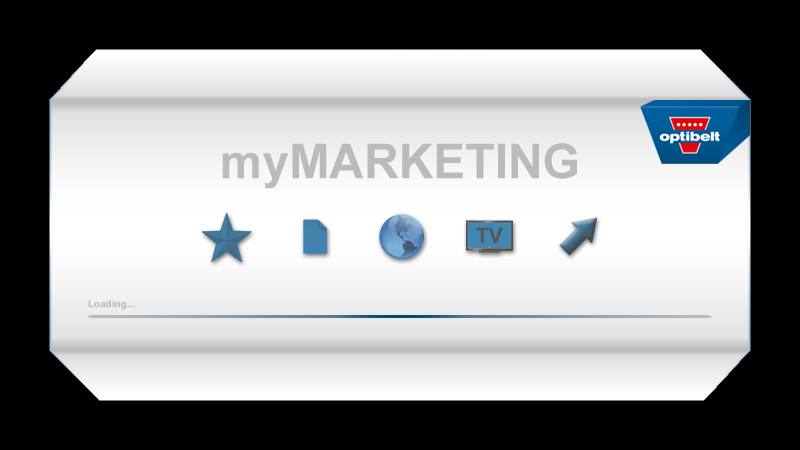
<style>
.page{position:relative;width:800px;height:450px;background:#000000}
.page>*{position:absolute;margin:0}
.t1{font:48px "Arial-BoldMT";color:#bbbbbb}
.t2{font:21px "Arial-BoldMT";color:#555555}
.t3{font:10px "Arial-BoldMT";color:#bbbbbb}
</style>
<div class="page">
<p class="t1" style="left:222px;top:143px;width:355px;height:46px">myMARKETING</p>
<p class="t2" style="left:476px;top:227px;width:27px;height:16px">TV</p>
<p class="t3" style="left:88px;top:300px;width:47px;height:10px">Loading...</p>
</div>
